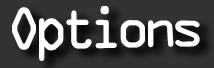
<style>
.page{position:relative;width:214px;height:68px;background:#333333}
.page>*{position:absolute;margin:0}
.t1{font:60px "OCRAExtended";letter-spacing:-0.15em;color:#ffffff}
</style>
<div class="page">
<p class="t1" style="left:12px;top:6px;width:188px;height:55px">Options</p>
</div>
